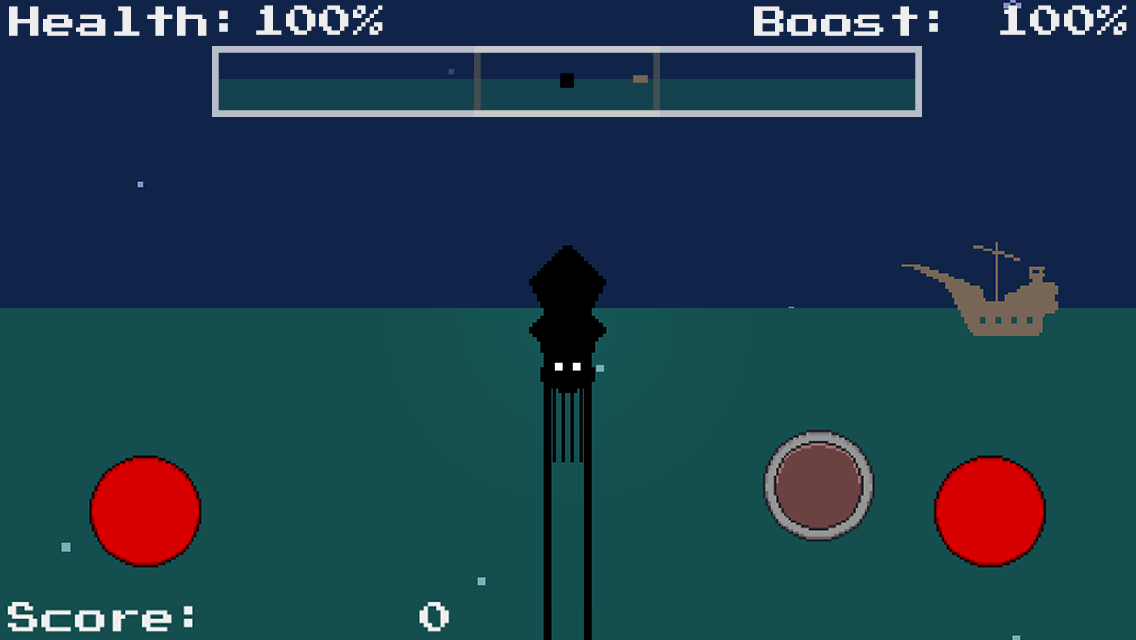
<style>
.page{position:relative;width:1136px;height:640px;background:#10244a}
.page>*{position:absolute;margin:0}
.t1{font:33.5px "PressStart2P";color:#eeeeee}
</style>
<div class="page">
<p class="t1" style="left:9px;top:6px;width:219px;height:30px">Health:</p>
<p class="t1" style="left:256px;top:5px;width:127px;height:30px">100%</p>
<p class="t1" style="left:754px;top:6px;width:184px;height:30px">Boost:</p>
<p class="t1" style="left:1000px;top:5px;width:127px;height:30px">100%</p>
</div>
